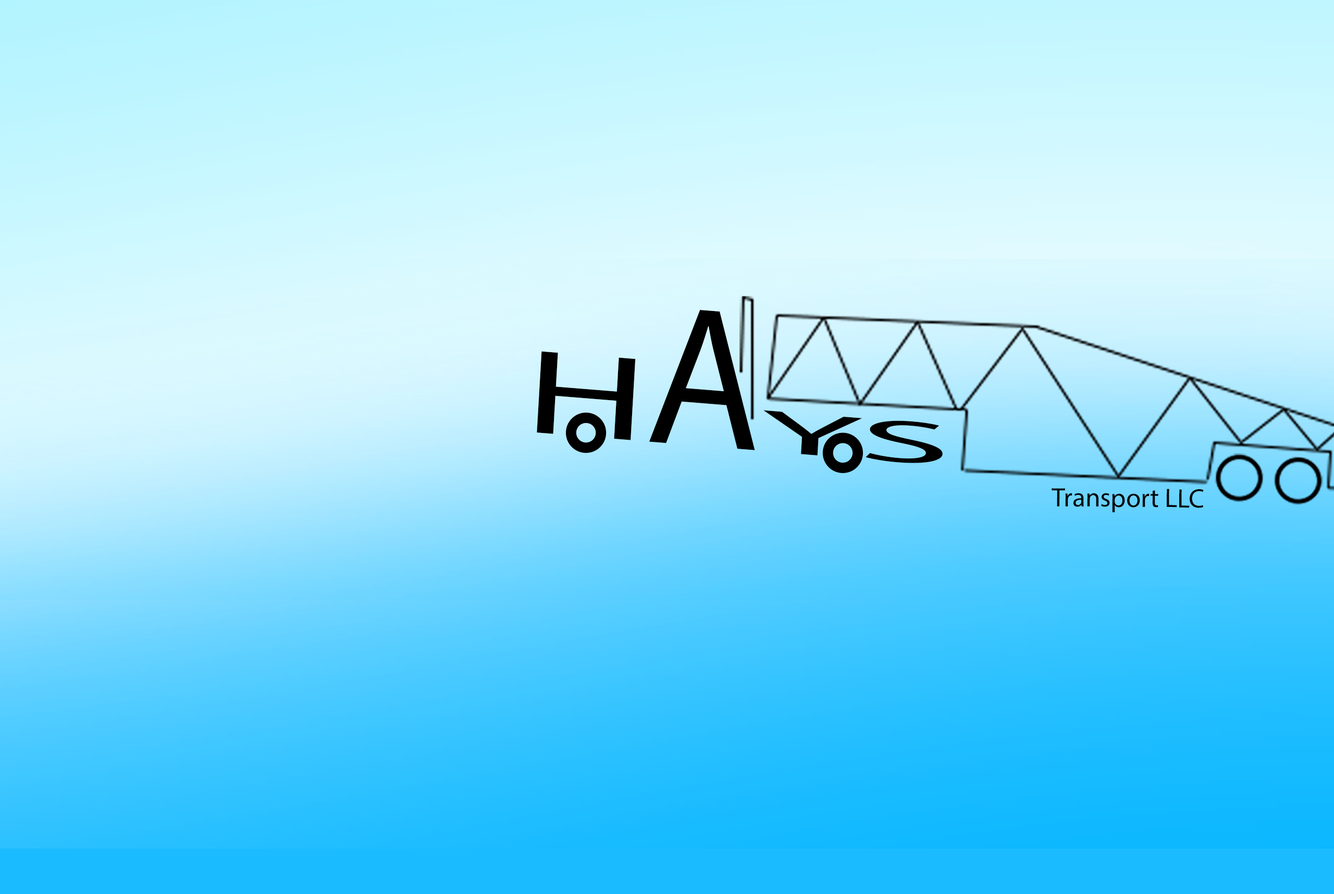
<style>
.page{position:relative;width:1334px;height:894px}
.page>*{position:absolute;margin:0}
.t1{font:60.3px "MyriadPro-Regular";color:#000000;scale:3.11 1}
.t2{font:120.5px "MyriadPro-Regular";color:#000000;scale:1.56 1}
.t3{font:200.9px "MyriadPro-Regular";color:#000000;scale:0.93 1}
.t4{font:26.8px "MyriadPro-Regular";color:#000000}
</style>
<div class="page">
<p class="t1" style="left:537px;top:309px;width:405px;height:154px;rotate:5deg"><span class="t2">H</span><span class="t3">A</span>YS</p>
<p class="t4" style="left:1051px;top:488px;width:153px;height:25px">Transport LLC</p>
</div>
